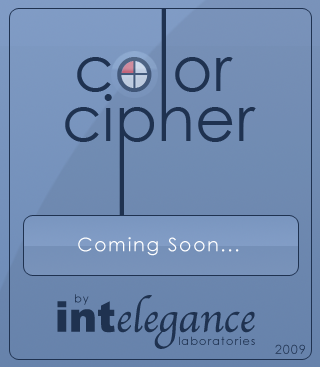
<style>
.page{position:relative;width:320px;height:367px}
.page>*{position:absolute;margin:0}
.t1{font:62.4px "CenturyGothic";color:#1f3250}
.t2{font:18.6px "CenturyGothic";letter-spacing:0.1em;color:#ffffff}
.t3{font:11.3px "CenturyGothic";letter-spacing:0.1em;color:#1f3250}
.t4{font:42.1px "Apple-Chancery";color:#1f3250}
.t5{font:42.1px "Arial-Black";color:#1f3250}
.t6{font:12.2px "CenturyGothic";letter-spacing:0.1em;color:#1f3250}
</style>
<div class="page">
<p class="t1" style="left:77px;top:57px;width:156px;height:35px">co or</p>
<p class="t1" style="left:65px;top:94px;width:191px;height:59px">cipher</p>
<p class="t2" style="left:78px;top:237px;width:161px;height:19px">Coming Soon...</p>
<p class="t3" style="left:75px;top:294px;width:14px;height:11px">by</p>
<p class="t4" style="left:57px;top:295px;width:198px;height:54px"><span class="t5">int</span>elegance</p>
<p class="t3" style="left:179px;top:336px;width:76px;height:9px">laboratories</p>
<p class="t6" style="left:275px;top:344px;width:30px;height:10px">2009</p>
</div>
